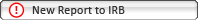
<style>
.page{position:relative;width:198px;height:20px;background:#ffffff}
.page>*{position:absolute;margin:0}
.t1{font:12.4px "Calibri";color:#333333}
</style>
<div class="page">
<p class="t1" style="left:32px;top:6px;width:93px;height:10px">New Report to IRB</p>
</div>
